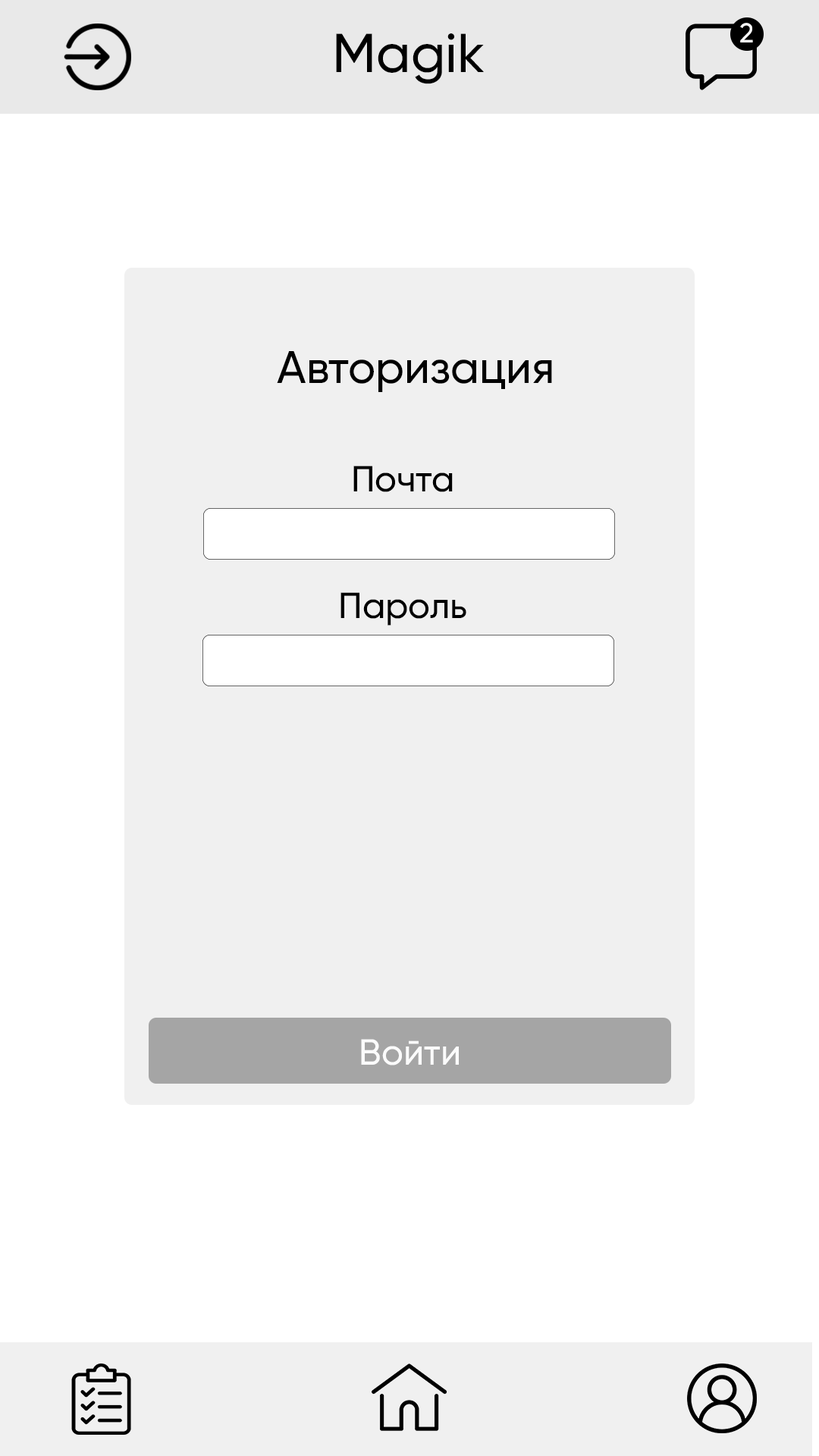
<style>
.page{position:relative;width:819px;height:1456px;background:#ffffff}
.page>*{position:absolute;margin:0}
.t1{font:27.3px "Gilroy-Medium";color:#ffffff}
.t2{font:54.6px "Gilroy-Medium";color:#000000}
.t3{font:45.5px "Gilroy-Medium";color:#000000}
.t4{font:36.4px "Gilroy-Medium";color:#000000}
.t5{font:36.4px "Gilroy-Medium";color:#fbfbfb}
</style>
<div class="page">
<p class="t1" style="left:740px;top:23px;width:13px;height:19px">2</p>
<p class="t2" style="left:336px;top:33px;width:148px;height:51px">Magik</p>
<p class="t3" style="left:277px;top:351px;width:275px;height:41px">Авторизация</p>
<p class="t4" style="left:353px;top:466px;width:100px;height:26px">Почта</p>
<p class="t4" style="left:340px;top:592px;width:126px;height:34px">Пароль</p>
<p class="t5" style="left:361px;top:1039px;width:98px;height:26px">Войти</p>
</div>
